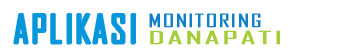
<style>
.page{position:relative;width:350px;height:56px;background:#ffffff}
.page>*{position:absolute;margin:0}
.t1{font:37.9px "AgencyFB-Reg";letter-spacing:0.05em;color:#0696dc;font-weight:bold}
.t2{font:17.6px "AgencyFB-Reg";letter-spacing:0.05em;color:#1180c8;font-weight:bold;scale:1.41 1}
.t3{font:17.6px "AgencyFB-Reg";letter-spacing:0.05em;color:#a4cd37;font-weight:bold;scale:2.13 1}
</style>
<div class="page">
<p class="t1" style="left:14px;top:14px;width:121px;height:30px">APLIKASI</p>
<p class="t2" style="left:149px;top:13px;width:112px;height:15px">MONITORING</p>
<p class="t3" style="left:150px;top:30px;width:130px;height:15px">DANAPATI</p>
</div>
